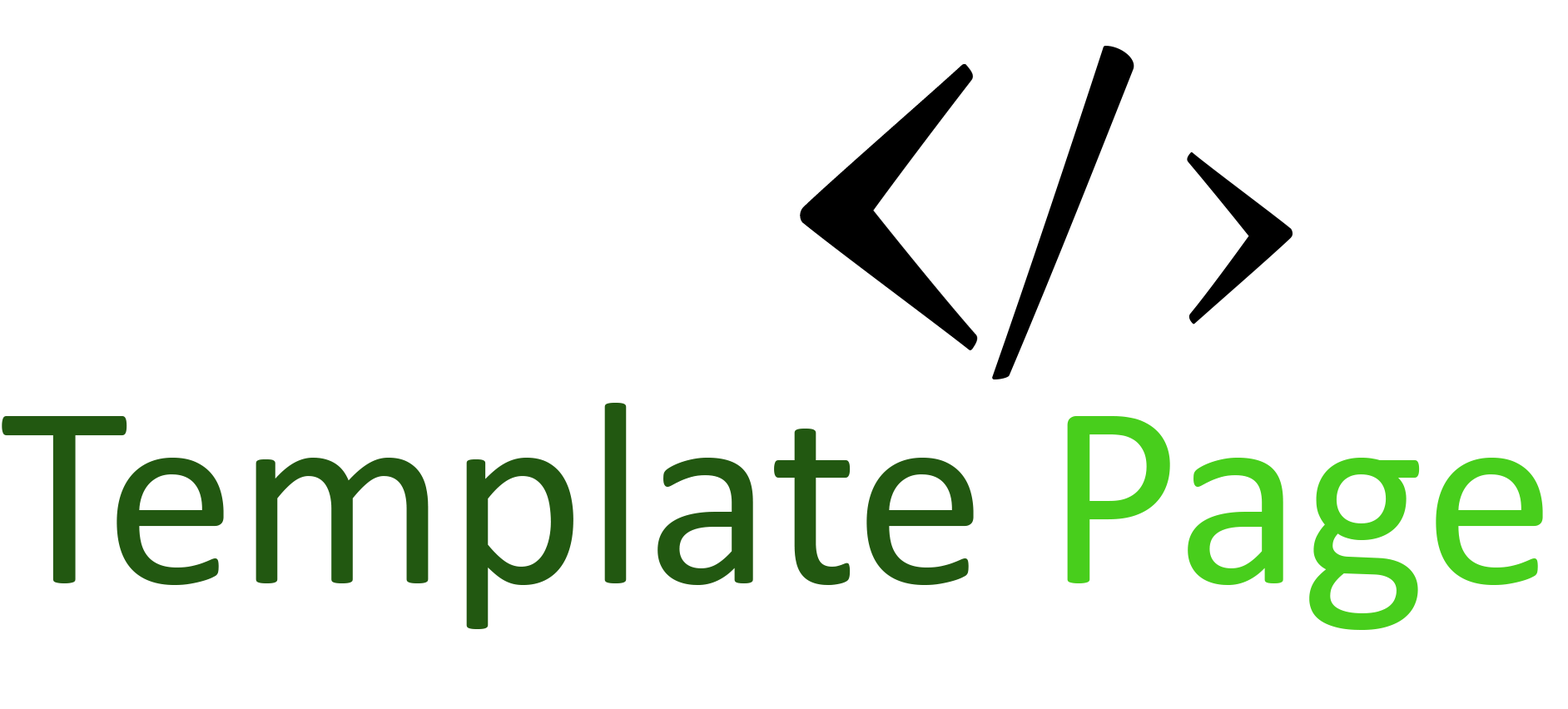
<style>
.page{position:relative;width:1568px;height:709px;background:#ffffff}
.page>*{position:absolute;margin:0}
.t1{font:520.2px "NuevaStd-Bold";color:#000000}
.t2{font:263.6px "Calibri";color:#225811}
.t3{font:263.6px "Calibri";color:#48ce1c}
</style>
<div class="page">
<p class="t1" style="left:992px;top:46px;width:301px;height:334px">/&gt;</p>
<p class="t2" style="left:2px;top:403px;width:1541px;height:227px">Template <span class="t3">Page</span></p>
</div>
